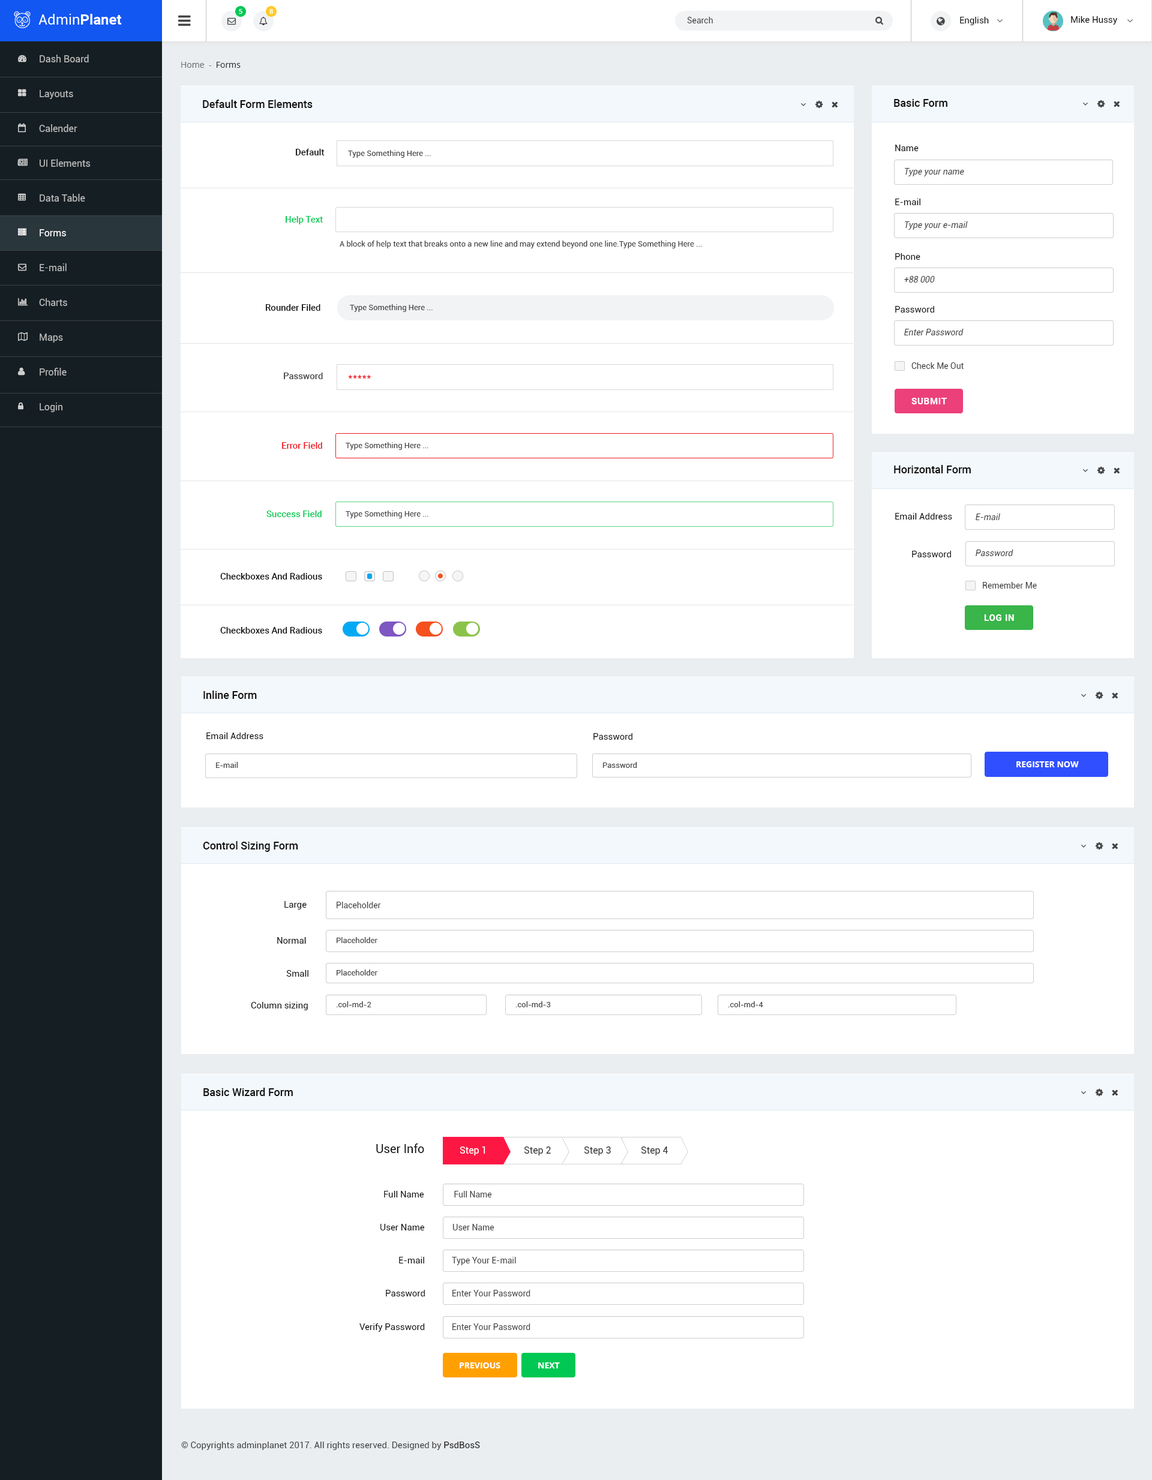
<style>
.page{position:relative;width:1152px;height:1480px;background:#ffffff}
.page>*{position:absolute;margin:0}
.t1{font:6.6px "OpenSans-Semibold";color:#ffffff}
.t2{font:8.4px "Roboto-Regular";color:#444444}
.t3{font:9px "Roboto-Regular";color:#111111}
.t4{font:9.6px/34.8px "Roboto-Regular";color:#b9b9b9}
.t5{font:9.6px/34.8px "Roboto-Regular";color:#ffffff}
.t6{font:8.4px "OpenSans";color:#707070}
.t7{font:8.4px "OpenSans";color:#333333}
.t8{font:10.8px "Roboto-Medium";color:#111111}
.t9{font:9px "Roboto-Medium";color:#111111}
.t10{font:7.8px "Roboto-Regular";color:#444444}
.t11{font:8.4px "Roboto-Regular";color:#444444;font-style:italic}
.t12{font:9px "Roboto-Medium";color:#00c853}
.t13{font:9px "Roboto-Medium";color:#464646}
.t14{font:10.8px "Roboto-Regular";color:#ed1c24}
.t15{font:9px "Roboto-Bold";letter-spacing:0.05em;color:#ffffff;text-transform:uppercase}
.t16{font:9px "Roboto-Medium";color:#ed1c24}
.t17{font:8.4px "OpenSans-Bold";color:#ffffff;text-transform:uppercase}
.t18{font:12px "Roboto-Regular";color:#111111}
.t19{font:9.6px "Roboto-Regular";color:#ffffff}
.t20{font:9.6px "Roboto-Regular";color:#333333}
.t21{font:9px "Roboto-Regular";color:#444444}
</style>
<div class="page">
<p class="t1" style="left:239px;top:9px;width:3px;height:5px">5</p>
<p class="t1" style="left:269px;top:9px;width:4px;height:5px">8</p>
<p class="t2" style="left:687px;top:17px;width:26px;height:6px">Search</p>
<p class="t3" style="left:960px;top:17px;width:29px;height:8px">English</p>
<p class="t3" style="left:1071px;top:16px;width:46px;height:9px">Mike Hussy</p>
<p class="t4" style="left:39px;top:55px;width:52px;height:357px">Dash Board<br>Layouts<br>Calender<br>UI Elements<br>Data Table<br><span class="t5">Forms<br></span>E-mail<br>Charts<br>Maps<br>Profile<br>Login</p>
<p class="t6" style="left:181px;top:62px;width:60px;height:6px">Home  - <span class="t7"> Forms</span></p>
<p class="t8" style="left:203px;top:100px;width:110px;height:8px">Default Form Elements</p>
<p class="t8" style="left:894px;top:99px;width:53px;height:8px">Basic Form</p>
<p class="t9" style="left:296px;top:149px;width:29px;height:6px">Default</p>
<p class="t10" style="left:348px;top:150px;width:83px;height:8px">Type Something Here ...</p>
<p class="t3" style="left:895px;top:145px;width:24px;height:6px">Name</p>
<p class="t11" style="left:905px;top:168px;width:59px;height:8px">Type your name</p>
<p class="t3" style="left:895px;top:199px;width:25px;height:6px">E-mail</p>
<p class="t12" style="left:286px;top:216px;width:37px;height:8px">Help Text</p>
<p class="t11" style="left:905px;top:221px;width:63px;height:9px">Type your e-mail</p>
<p class="t10" style="left:340px;top:241px;width:362px;height:7px">A block of help text that breaks onto a new line and may extend beyond one line.Type Something Here ...</p>
<p class="t3" style="left:895px;top:253px;width:25px;height:7px">Phone</p>
<p class="t11" style="left:904px;top:276px;width:31px;height:7px">+88 000</p>
<p class="t9" style="left:266px;top:304px;width:54px;height:7px">Rounder Filed</p>
<p class="t10" style="left:350px;top:304px;width:83px;height:8px">Type Something Here ...</p>
<p class="t3" style="left:895px;top:306px;width:39px;height:7px">Password</p>
<p class="t11" style="left:904px;top:329px;width:60px;height:6px">Enter Password</p>
<p class="t2" style="left:911px;top:362px;width:53px;height:7px">Check Me Out</p>
<p class="t13" style="left:284px;top:373px;width:39px;height:6px">Password</p>
<p class="t14" style="left:348px;top:375px;width:23px;height:4px">*****</p>
<p class="t15" style="left:911px;top:398px;width:36px;height:6px">Submit</p>
<p class="t16" style="left:282px;top:442px;width:40px;height:7px">Error Field</p>
<p class="t10" style="left:346px;top:442px;width:82px;height:8px">Type Something Here ...</p>
<p class="t8" style="left:894px;top:465px;width:77px;height:8px">Horizontal Form</p>
<p class="t12" style="left:266px;top:511px;width:56px;height:6px">Success Field</p>
<p class="t10" style="left:346px;top:511px;width:82px;height:7px">Type Something Here ...</p>
<p class="t3" style="left:895px;top:513px;width:57px;height:7px">Email Address</p>
<p class="t11" style="left:976px;top:514px;width:24px;height:6px">E-mail</p>
<p class="t3" style="left:912px;top:551px;width:39px;height:6px">Password</p>
<p class="t11" style="left:976px;top:550px;width:37px;height:6px">Password</p>
<p class="t9" style="left:220px;top:573px;width:102px;height:7px">Checkboxes And Radious</p>
<p class="t2" style="left:983px;top:582px;width:54px;height:7px">Remember Me</p>
<p class="t15" style="left:984px;top:614px;width:30px;height:7px">Log In</p>
<p class="t9" style="left:220px;top:627px;width:102px;height:7px">Checkboxes And Radious</p>
<p class="t8" style="left:203px;top:691px;width:54px;height:8px">Inline Form</p>
<p class="t3" style="left:206px;top:733px;width:57px;height:6px">Email Address</p>
<p class="t3" style="left:593px;top:733px;width:39px;height:7px">Password</p>
<p class="t17" style="left:1016px;top:761px;width:63px;height:6px">Register Now</p>
<p class="t10" style="left:216px;top:762px;width:22px;height:6px">E-mail</p>
<p class="t10" style="left:603px;top:762px;width:34px;height:6px">Password</p>
<p class="t8" style="left:203px;top:841px;width:95px;height:11px">Control Sizing Form</p>
<p class="t3" style="left:284px;top:901px;width:23px;height:9px">Large</p>
<p class="t2" style="left:337px;top:902px;width:44px;height:6px">Placeholder</p>
<p class="t3" style="left:277px;top:937px;width:29px;height:7px">Normal</p>
<p class="t10" style="left:337px;top:937px;width:40px;height:6px">Placeholder</p>
<p class="t3" style="left:286px;top:970px;width:22px;height:7px">Small</p>
<p class="t10" style="left:337px;top:970px;width:40px;height:6px">Placeholder</p>
<p class="t10" style="left:336px;top:1001px;width:35px;height:6px">.col-md-2</p>
<p class="t10" style="left:515px;top:1001px;width:36px;height:6px">.col-md-3</p>
<p class="t10" style="left:728px;top:1001px;width:35px;height:6px">.col-md-4</p>
<p class="t3" style="left:251px;top:1002px;width:57px;height:8px">Column sizing</p>
<p class="t8" style="left:203px;top:1088px;width:90px;height:8px">Basic Wizard Form</p>
<p class="t18" style="left:376px;top:1144px;width:48px;height:9px">User Info</p>
<p class="t19" style="left:460px;top:1147px;width:25px;height:9px">Step 1</p>
<p class="t20" style="left:524px;top:1147px;width:27px;height:9px">Step 2</p>
<p class="t20" style="left:584px;top:1147px;width:27px;height:9px">Step 3</p>
<p class="t20" style="left:641px;top:1147px;width:27px;height:9px">Step 4</p>
<p class="t3" style="left:384px;top:1191px;width:40px;height:7px">Full Name</p>
<p class="t2" style="left:454px;top:1191px;width:38px;height:7px">Full Name</p>
<p class="t3" style="left:380px;top:1224px;width:45px;height:7px">User Name</p>
<p class="t2" style="left:452px;top:1224px;width:42px;height:7px">User Name</p>
<p class="t3" style="left:399px;top:1257px;width:25px;height:7px">E-mail</p>
<p class="t2" style="left:452px;top:1257px;width:64px;height:8px">Type Your E-mail</p>
<p class="t3" style="left:386px;top:1290px;width:39px;height:7px">Password</p>
<p class="t2" style="left:452px;top:1290px;width:78px;height:7px">Enter Your Password</p>
<p class="t3" style="left:359px;top:1324px;width:66px;height:8px">Verify Password</p>
<p class="t2" style="left:452px;top:1324px;width:78px;height:6px">Enter Your Password</p>
<p class="t17" style="left:460px;top:1363px;width:40px;height:6px">Previous</p>
<p class="t17" style="left:538px;top:1363px;width:22px;height:6px">Next</p>
<p class="t21" style="left:181px;top:1442px;width:299px;height:8px">© Copyrights adminplanet 2017. All rights reserved. Designed by <span class="t3">PsdBosS</span></p>
</div>
